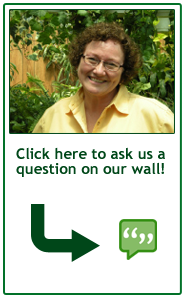
<style>
.page{position:relative;width:185px;height:300px;background:#ffffff}
.page>*{position:absolute;margin:0}
.t1{font:15px/15px "TrebuchetMS-Bold";color:#004719}
</style>
<div class="page">
<p class="t1" style="left:16px;top:147px;width:149px;height:30px;text-align:justify">Click here to ask us a question on our wall!</p>
</div>
